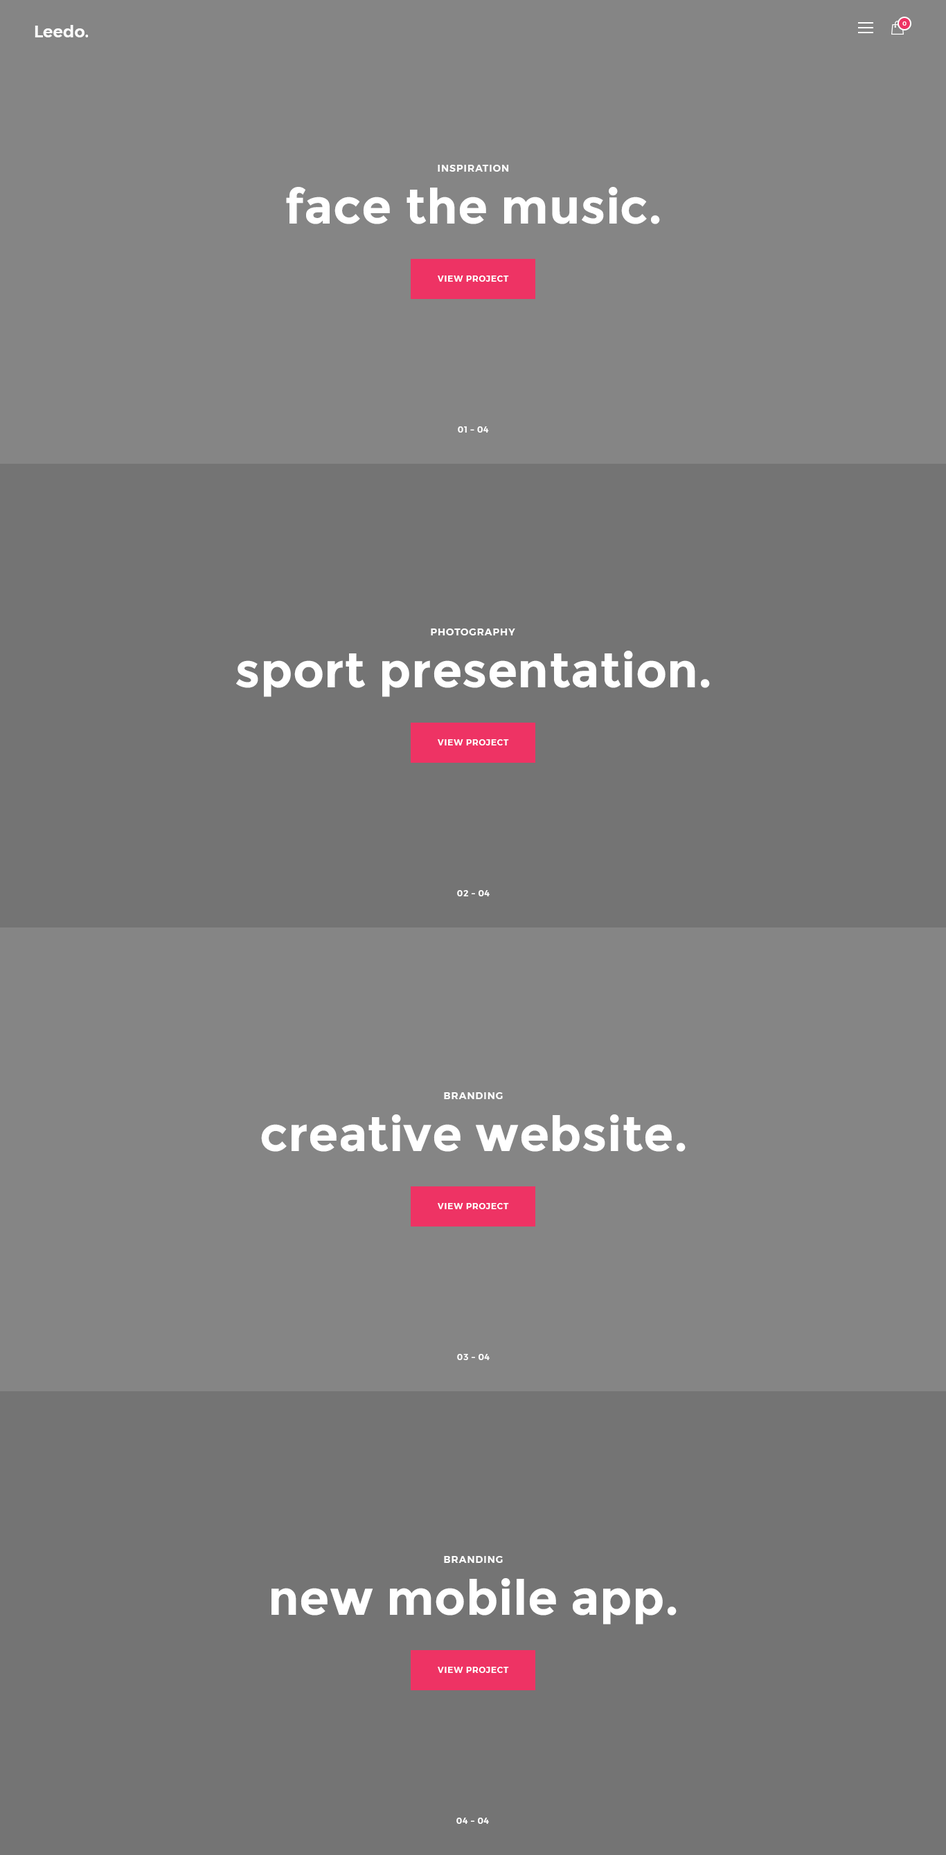
<style>
.page{position:relative;width:946px;height:1855px;background:#858585}
.page>*{position:absolute;margin:0}
.t1{font:16.6px "Montserrat-SemiBold";color:#ffffff}
.t2{font:5.5px "Montserrat-Medium";letter-spacing:0.05em;color:#ffffff;text-transform:uppercase}
.t3{font:9.7px "Montserrat-SemiBold";letter-spacing:0.075em;color:#ffffff;text-transform:uppercase}
.t4{font:48.5px "Montserrat-Bold";letter-spacing:0.005em;color:#ffffff}
.t5{font:8.3px "Montserrat-SemiBold";letter-spacing:0.075em;color:#ffffff;text-transform:uppercase}
</style>
<div class="page">
<p class="t1" style="left:35px;top:25px;width:54px;height:12px">Leedo.</p>
<p class="t2" style="left:902px;top:21px;width:4px;height:5px">0</p>
<p class="t3" style="left:438px;top:165px;width:71px;height:7px">inspiration</p>
<p class="t4" style="left:286px;top:187px;width:374px;height:37px">face the music.</p>
<p class="t5" style="left:438px;top:276px;width:71px;height:6px">view project</p>
<p class="t5" style="left:458px;top:426px;width:31px;height:7px">01 – 04</p>
<p class="t3" style="left:431px;top:629px;width:84px;height:7px">photography</p>
<p class="t4" style="left:236px;top:651px;width:474px;height:46px">sport presentation.</p>
<p class="t5" style="left:438px;top:739px;width:71px;height:7px">view project</p>
<p class="t5" style="left:457px;top:890px;width:32px;height:7px">02 – 04</p>
<p class="t3" style="left:444px;top:1092px;width:59px;height:7px">branding</p>
<p class="t4" style="left:261px;top:1115px;width:424px;height:37px">creative website.</p>
<p class="t5" style="left:438px;top:1203px;width:71px;height:6px">view project</p>
<p class="t5" style="left:457px;top:1354px;width:32px;height:6px">03 – 04</p>
<p class="t3" style="left:444px;top:1556px;width:59px;height:7px">branding</p>
<p class="t4" style="left:271px;top:1578px;width:405px;height:47px">new mobile app.</p>
<p class="t5" style="left:438px;top:1667px;width:71px;height:6px">view project</p>
<p class="t5" style="left:456px;top:1818px;width:33px;height:6px">04 – 04</p>
</div>
